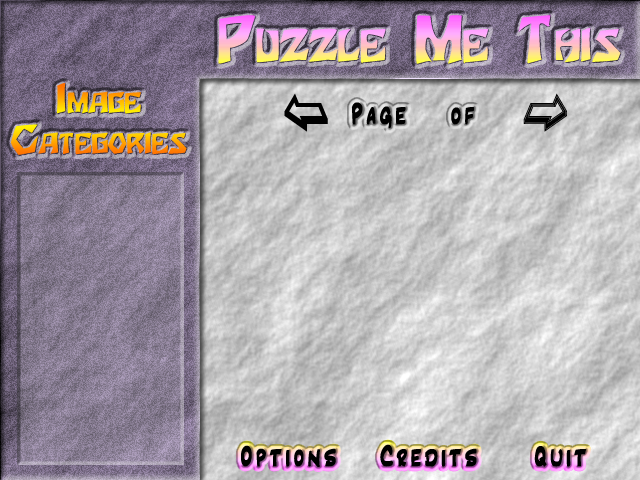
<style>
.page{position:relative;width:640px;height:480px}
.page>*{position:absolute;margin:0}
.t1{font:54px "Houters-Normal";font-variant:small-caps;font-weight:bold}
.t2{font:34px "Houters-Normal";font-variant:small-caps;font-weight:bold}
.t3{font:30px "Inkpen2Script";letter-spacing:0.1em;color:#000000;font-weight:bold}
</style>
<div class="page">
<p class="t1" style="left:218px;top:15px;width:403px;height:49px">Puzzle Me This</p>
<p class="t2" style="left:11px;top:83px;width:176px;height:72px;text-align:center">Image<br>Categories</p>
<p class="t3" style="left:241px;top:444px;width:346px;height:23px">Options   Credits    Quit</p>
</div>
